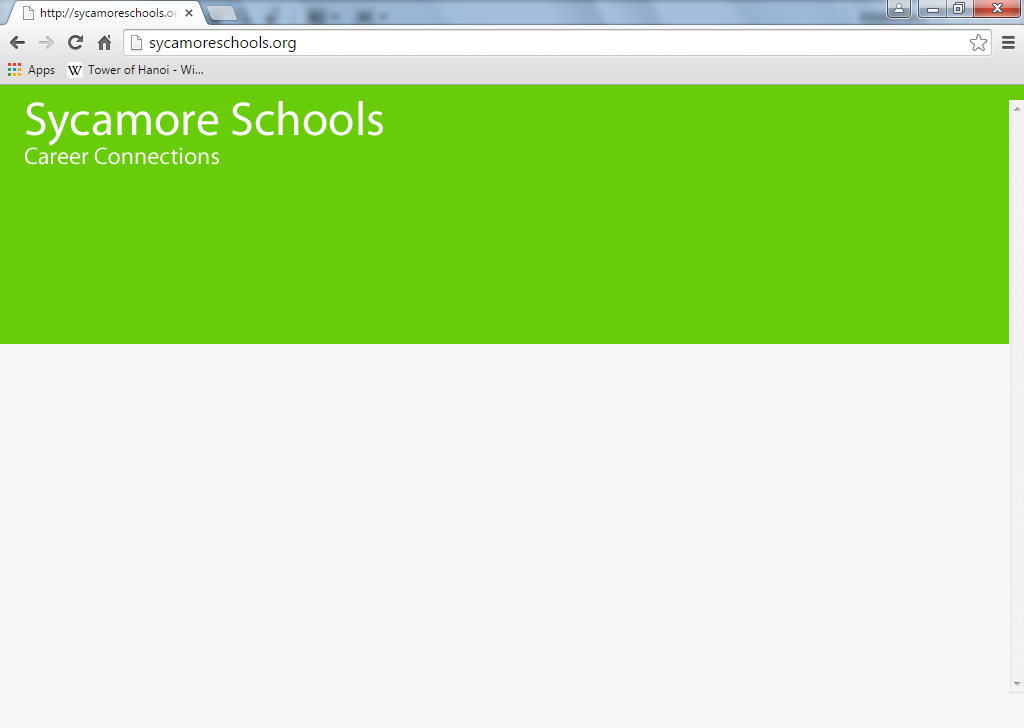
<style>
.page{position:relative;width:1024px;height:728px;background:#f7f7f7}
.page>*{position:absolute;margin:0}
.t1{font:24px "MyriadPro-Regular";color:#ffffff}
.t2{font:48px "MyriadPro-Regular";color:#ffffff}
</style>
<div class="page">
<p class="t1" style="left:25px;top:101px;width:358px;height:64px"><span class="t2">Sycamore Schools<br></span>Career Connections</p>
</div>
